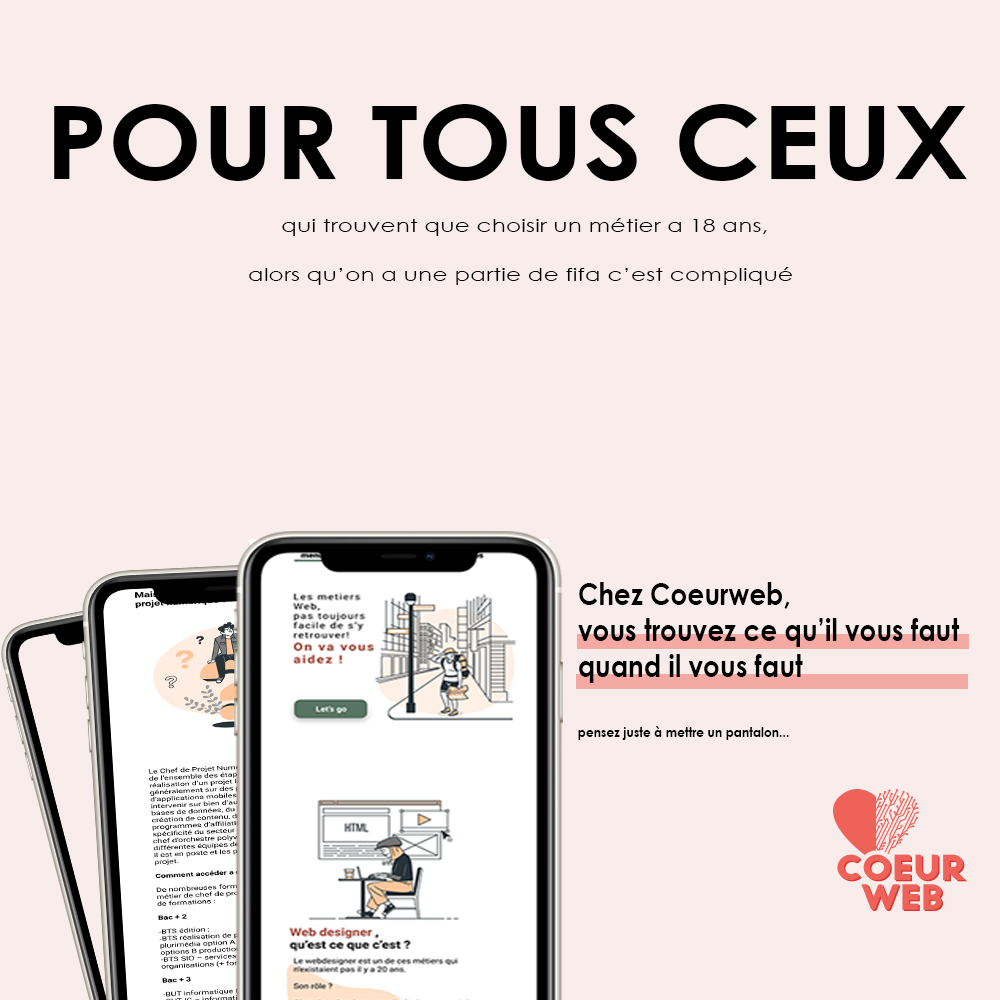
<style>
.page{position:relative;width:1000px;height:1000px;background:#f8edeb}
.page>*{position:absolute;margin:0}
.t1{font:102.4px "CenturyGothic-Bold";color:#000000;scale:1.1 1}
.t2{font:18px "CenturyGothic";color:#000000;scale:1.3 1}
.t3{font:30px "CenturyGothic-Bold";color:#000000;scale:0.87 1}
.t4{font:14px "CenturyGothic-Bold";color:#000000;scale:0.87 1}
</style>
<div class="page">
<p class="t1" style="left:54px;top:104px;width:913px;height:77px">POUR TOUS CEUX</p>
<p class="t2" style="left:249px;top:218px;width:543px;height:67px;text-align:center">qui trouvent que choisir un métier a 18 ans, <br>alors qu’on a une partie de fifa c’est compliqué</p>
<p class="t3" style="left:578px;top:582px;width:382px;height:158px">Chez Coeurweb,<br>vous trouvez ce qu’il vous faut<br>quand il vous faut <br><br><span class="t4">pensez juste à mettre un pantalon...</span></p>
</div>
